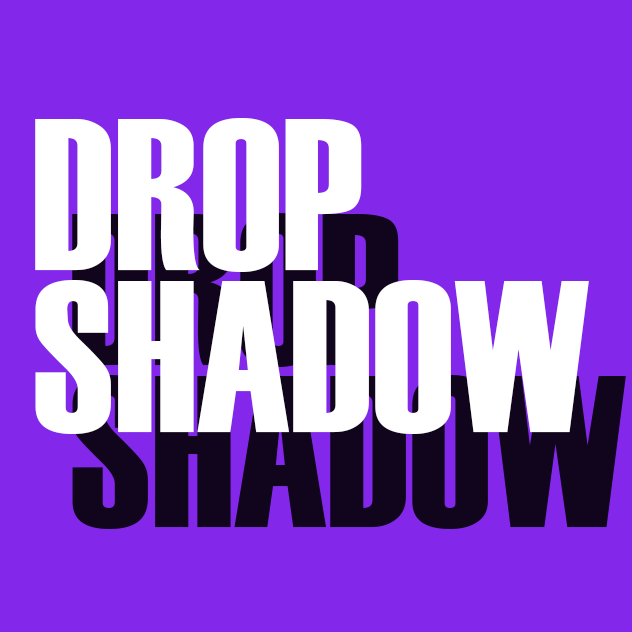
<style>
.page{position:relative;width:632px;height:632px;background:#8328ea}
.page>*{position:absolute;margin:0}
.t1{font:214.6px/161.3px "Haettenschweiler";color:#ffffff;text-transform:uppercase}
</style>
<div class="page">
<p class="t1" style="left:35px;top:118px;width:554px;height:316px">DROP<br>SHADOW</p>
</div>
